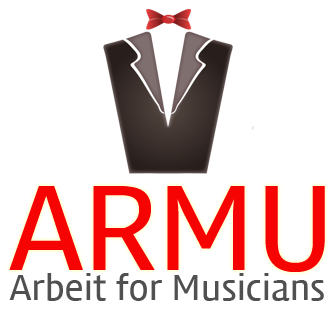
<style>
.page{position:relative;width:334px;height:310px;background:#ffffff}
.page>*{position:absolute;margin:0}
.t1{font:109.5px "Daum_Regular";color:#f60303;scale:0.96 1}
.t2{font:32.6px "Daum_Regular";color:#505050;scale:0.96 1}
</style>
<div class="page">
<p class="t1" style="left:9px;top:186px;width:316px;height:86px">ARMU</p>
<p class="t2" style="left:9px;top:273px;width:315px;height:28px">Arbeit for Musicians</p>
</div>
